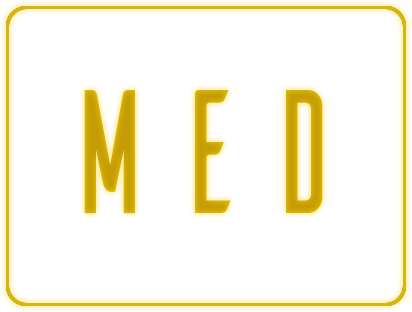
<style>
.page{position:relative;width:412px;height:312px;background:#ffffff}
.page>*{position:absolute;margin:0}
.t1{font:176px "Ailerons-Regular";color:#c59c04;scale:0.91 1}
</style>
<div class="page">
<p class="t1" style="left:84px;top:90px;width:239px;height:124px">med</p>
</div>
